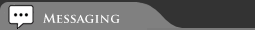
<style>
.page{position:relative;width:255px;height:30px;background:#808080}
.page>*{position:absolute;margin:0}
.t1{font:12px "TrajanPro-Bold";color:#ffffff;scale:1.05 1}
</style>
<div class="page">
<p class="t1" style="left:43px;top:13px;width:77px;height:10px">Messaging</p>
</div>
